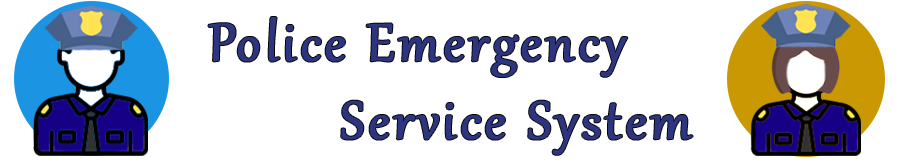
<style>
.page{position:relative;width:900px;height:160px;background:#ffffff}
.page>*{position:absolute;margin:0}
.t1{font:65px "Gabriola";letter-spacing:0.05em;color:#2d357e;font-weight:bold}
</style>
<div class="page">
<p class="t1" style="left:208px;top:17px;width:485px;height:138px">Police Emergency<br>        Service System</p>
</div>
